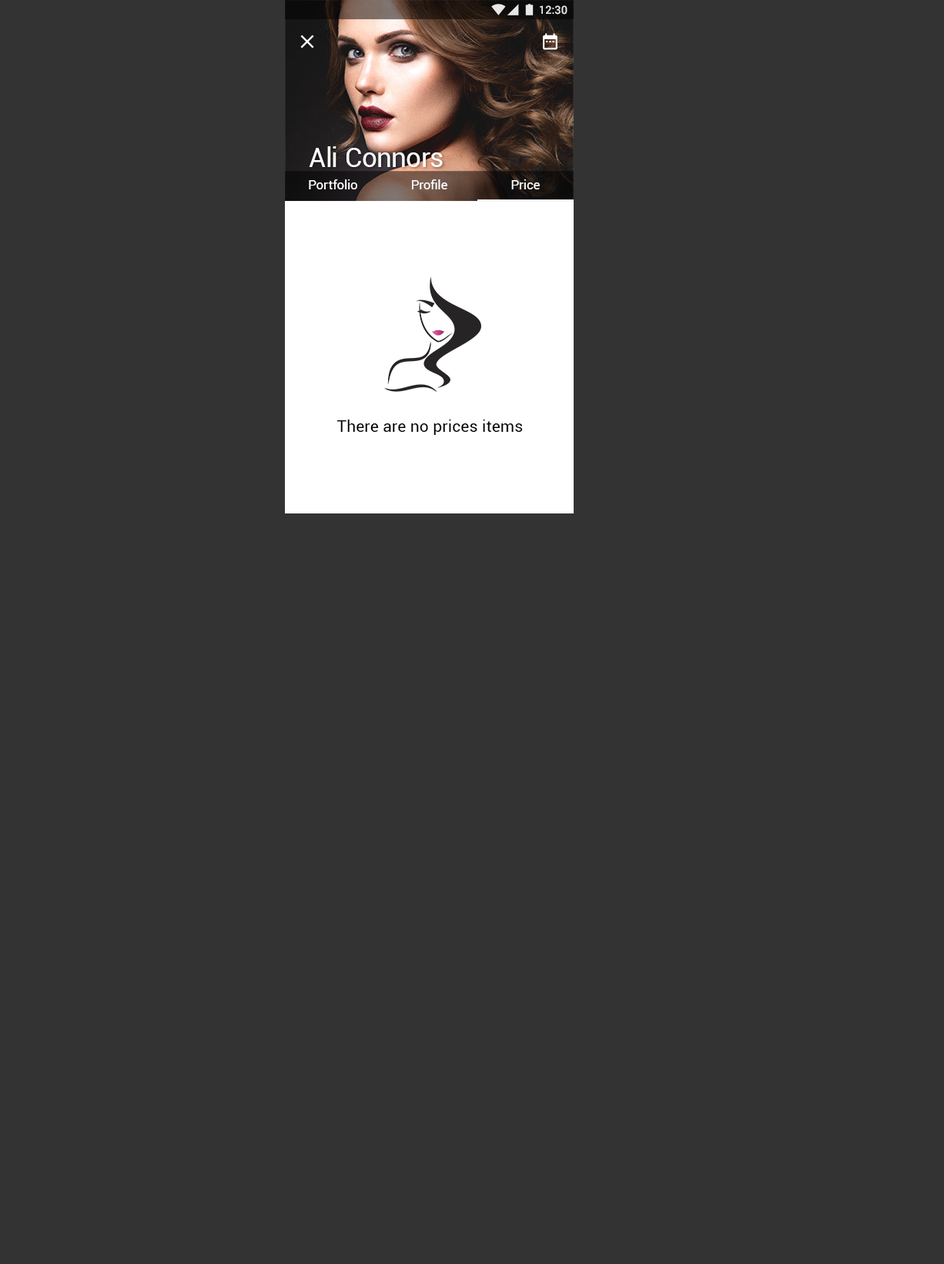
<style>
.page{position:relative;width:944px;height:1264px;background:#333333}
.page>*{position:absolute;margin:0}
.t1{font:11.2px "Roboto-Medium";color:#ffffff}
.t2{font:27.3px "Roboto-Regular";letter-spacing:-0.005em;color:#ffffff}
.t3{font:12.8px "Roboto-Regular";letter-spacing:0.01em;color:#ffffff}
.t4{font:16px "Roboto-Regular";letter-spacing:0.01em;color:#000000}
</style>
<div class="page">
<p class="t1" style="left:540px;top:5px;width:27px;height:10px">12:30</p>
<p class="t2" style="left:309px;top:146px;width:134px;height:21px">Ali Connors</p>
<p class="t3" style="left:309px;top:179px;width:48px;height:10px">Portfolio</p>
<p class="t3" style="left:412px;top:179px;width:35px;height:10px">Profile</p>
<p class="t3" style="left:511px;top:179px;width:29px;height:10px">Price</p>
<p class="t4" style="left:336px;top:419px;width:187px;height:16px">There are no prices items</p>
</div>
